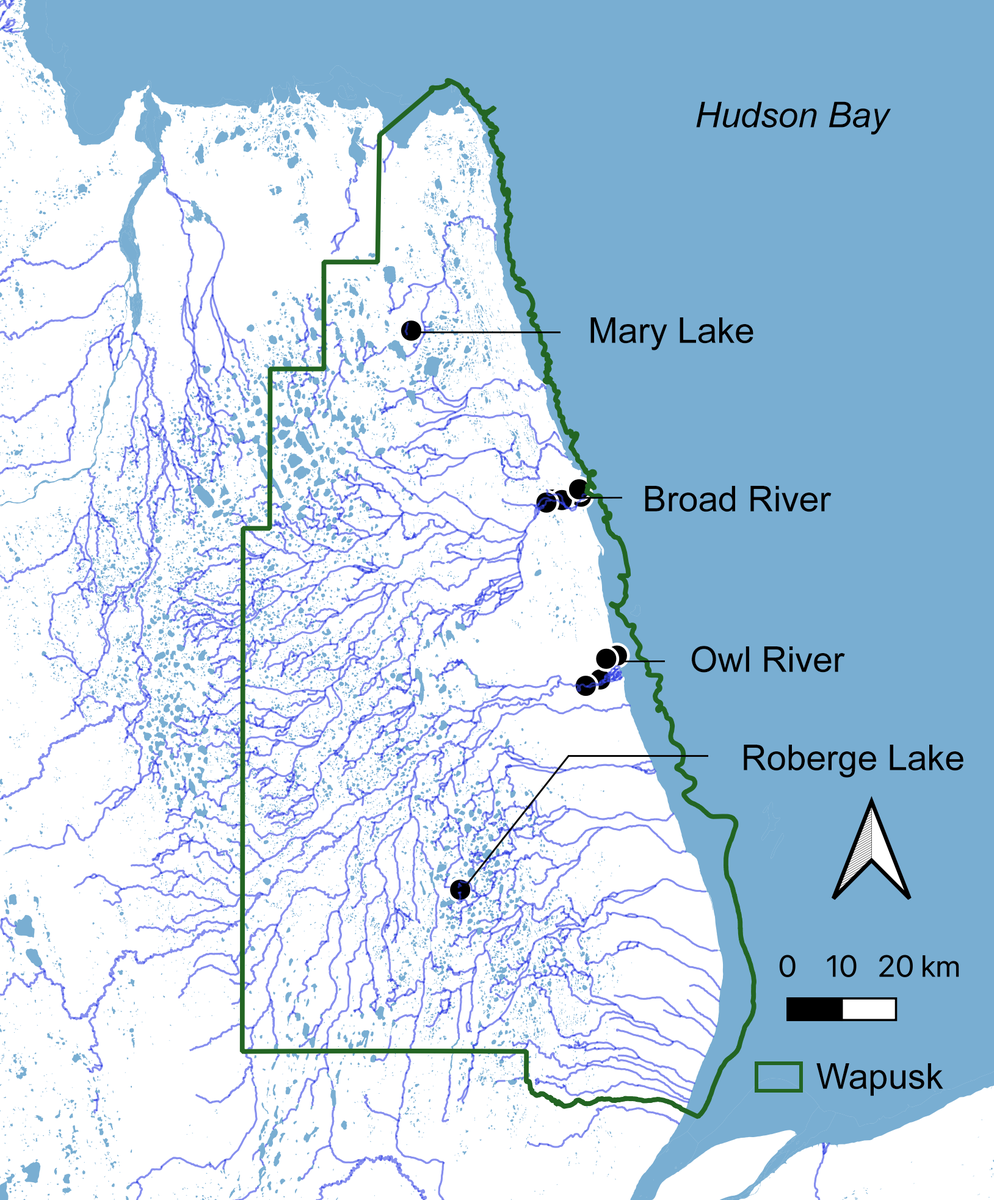
<style>
.page{position:relative;width:994px;height:1200px;background:#79aed2}
.page>*{position:absolute;margin:0}
.t1{font:35.6px "Arial-ItalicMT";color:#000000}
.t2{font:35.6px "ArialMT";color:#000000}
</style>
<div class="page">
<p class="t1" style="left:696px;top:101px;width:195px;height:34px">Hudson Bay</p>
<p class="t2" style="left:590px;top:317px;width:163px;height:33px">Mary Lake</p>
<p class="t2" style="left:645px;top:486px;width:186px;height:26px">Broad River</p>
<p class="t2" style="left:692px;top:646px;width:153px;height:27px">Owl River</p>
<p class="t2" style="left:743px;top:745px;width:220px;height:33px">Roberge Lake</p>
<p class="t2" style="left:816px;top:1063px;width:127px;height:33px">Wapusk</p>
</div>
